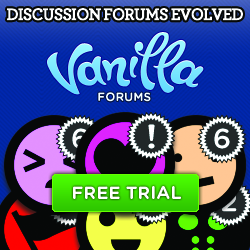
<style>
.page{position:relative;width:250px;height:250px}
.page>*{position:absolute;margin:0}
.t1{font:18px "Archer-BoldLF";letter-spacing:-0.075em;color:#ffffff;font-weight:bold;scale:0.95 1}
.t2{font:12px "GothamRounded-Bold";color:#f5ffff}
.t3{font:18px "GothamRounded-Bold";color:#ffffff}
</style>
<div class="page">
<p class="t1" style="left:7px;top:8px;width:236px;height:13px">DISCUSSION FORUMS EVOLVED</p>
<p class="t2" style="left:98px;top:92px;width:53px;height:10px">FORUMS</p>
<p class="t3" style="left:73px;top:186px;width:108px;height:13px">FREE TRIAL</p>
</div>
